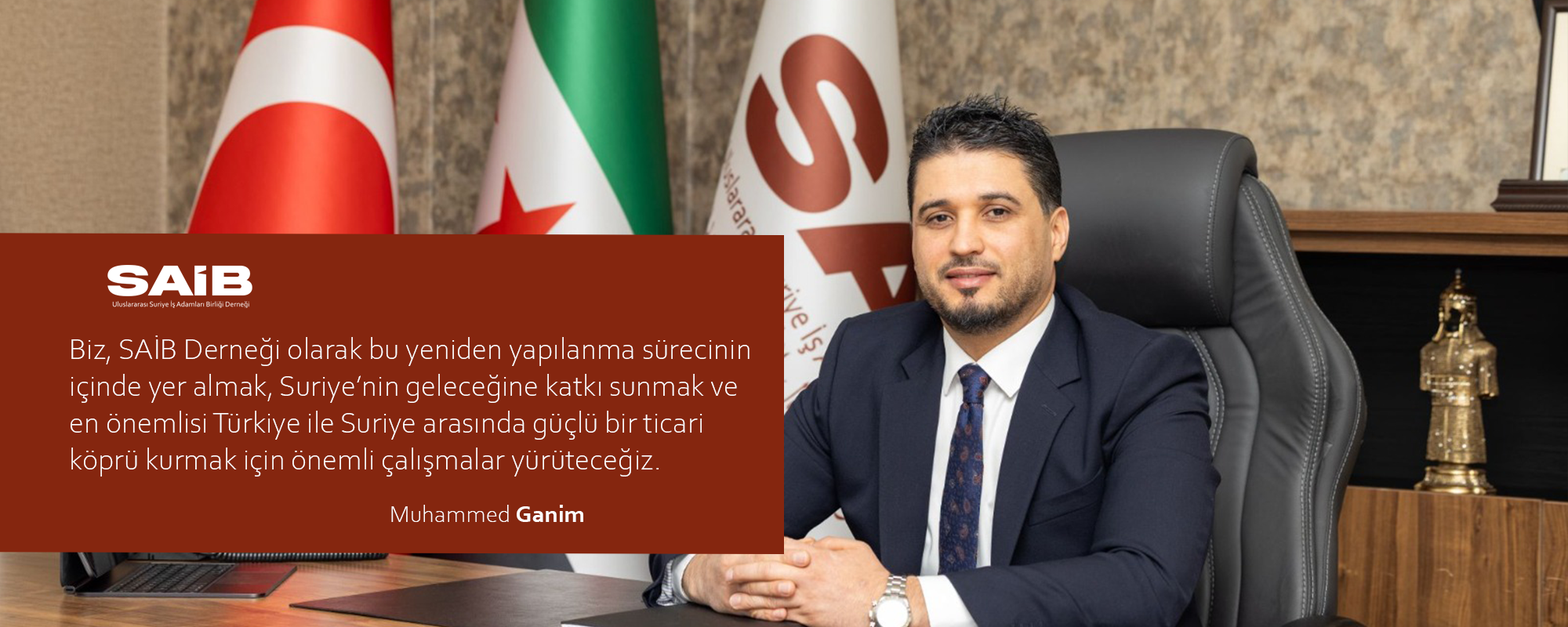
<style>
.page{position:relative;width:1568px;height:627px;background:#85260f}
.page>*{position:absolute;margin:0}
.t1{font:30.7px "CorbelLight";color:#ffffff}
.t2{font:24.6px "CorbelLight";color:#ffffff}
.t3{font:24.6px "Corbel-Bold";color:#ffffff}
</style>
<div class="page">
<p class="t1" style="left:71px;top:336px;width:679px;height:141px">Biz, SAİB Derneği olarak bu yeniden yapılanma sürecinin<br>içinde yer almak, Suriye’nin geleceğine katkı sunmak ve<br>en önemlisi Türkiye ile Suriye arasında güçlü bir ticari<br>köprü kurmak için önemli çalışmalar yürüteceğiz.</p>
<p class="t2" style="left:391px;top:505px;width:192px;height:17px">Muhammed <span class="t3">Ganim</span></p>
</div>
